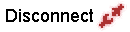
<style>
.page{position:relative;width:130px;height:32px;background:#ffffff}
.page>*{position:absolute;margin:0}
.t1{font:18px "ArialMT";color:#010101}
</style>
<div class="page">
<p class="t1" style="left:6px;top:9px;width:87px;height:13px">Disconnect</p>
</div>
